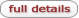
<style>
.page{position:relative;width:79px;height:18px;background:#ffffff}
.page>*{position:absolute;margin:0}
.t1{font:9px "Verdana";letter-spacing:-0.02em;color:#993333;font-weight:bold;scale:1.3 1}
</style>
<div class="page">
<p class="t1" style="left:9px;top:5px;width:61px;height:8px">full details</p>
</div>
